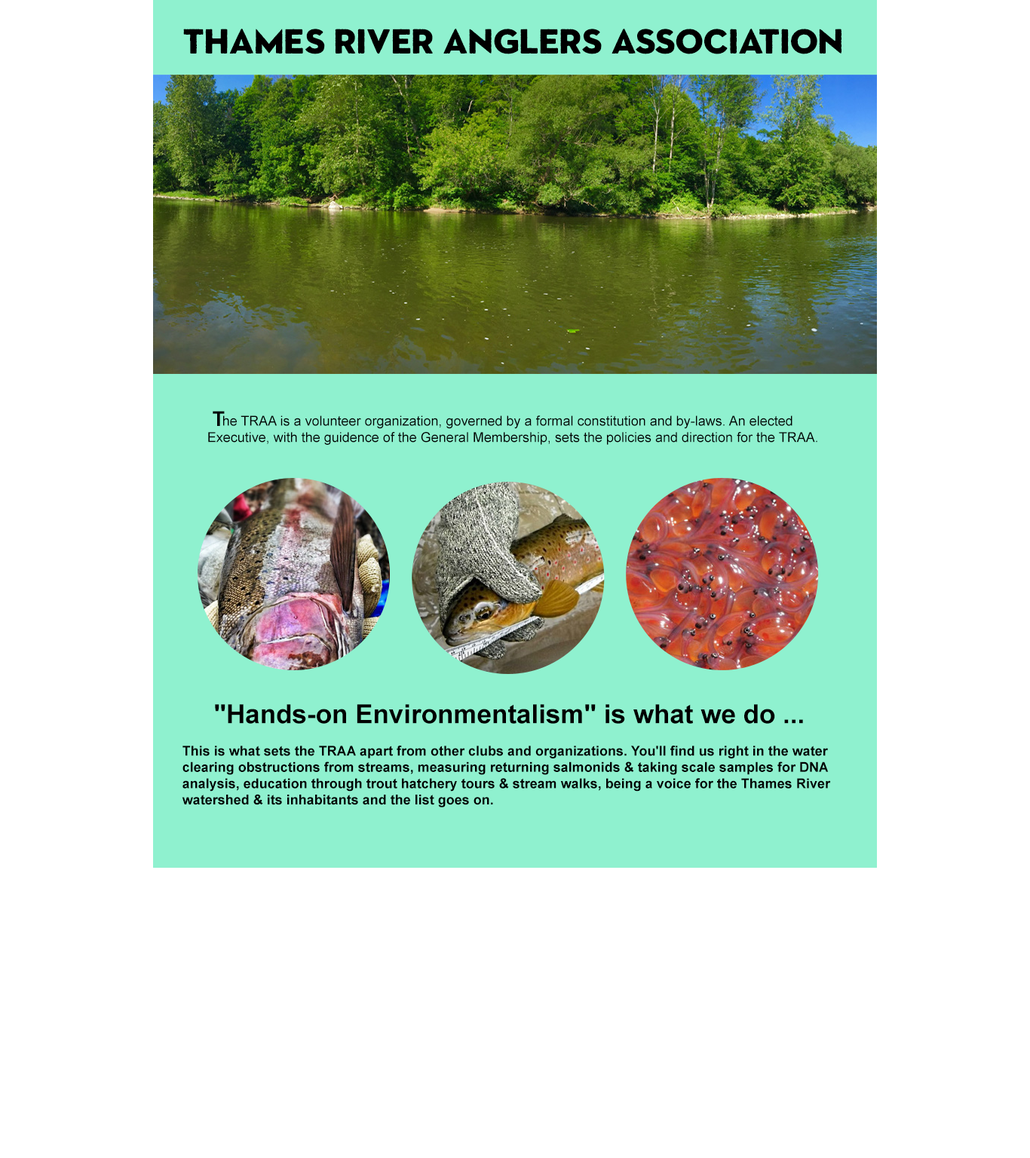
<style>
.page{position:relative;width:1030px;height:1158px;background:#ffffff}
.page>*{position:absolute;margin:0}
.t1{font:33.2px "SonderSans-Black";color:#000000;text-transform:uppercase}
.t2{font:20.4px "Arial-BoldMT";color:#000000}
.t3{font:13.6px "ArialMT";color:#000000}
.t4{font:26.4px "Arial-BoldMT";color:#000000}
.t5{font:13.6px "Arial-BoldMT";color:#000000}
</style>
<div class="page">
<p class="t1" style="left:183px;top:29px;width:658px;height:25px">Thames River Anglers Association</p>
<p class="t2" style="left:213px;top:411px;width:12px;height:15px">T</p>
<p class="t3" style="left:208px;top:415px;width:609px;height:30px">he TRAA is a volunteer organization, governed by a formal constitution and by-laws. An elected <br>Executive, with the guidence of the General Membership, sets the policies and direction for the TRAA.</p>
<p class="t4" style="left:215px;top:704px;width:588px;height:20px">"Hands-on Environmentalism" is what we do ...</p>
<p class="t5" style="left:182px;top:746px;width:649px;height:61px">This is what sets the TRAA apart from other clubs and organizations. You'll find us right in the water<br>clearing obstructions from streams, measuring returning salmonids &amp; taking scale samples for DNA <br>analysis, education through trout hatchery tours &amp; stream walks, being a voice for the Thames River <br>watershed &amp; its inhabitants and the list goes on.</p>
</div>
